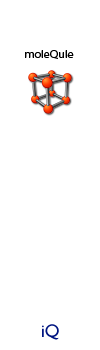
<style>
.page{position:relative;width:100px;height:350px;background:#ffffff}
.page>*{position:absolute;margin:0}
.t1{font:10.8px "MyriadPro-Regular";color:#000000;scale:1.11 1}
</style>
<div class="page">
<p class="t1" style="left:25px;top:50px;width:49px;height:9px">moleQule</p>
</div>
